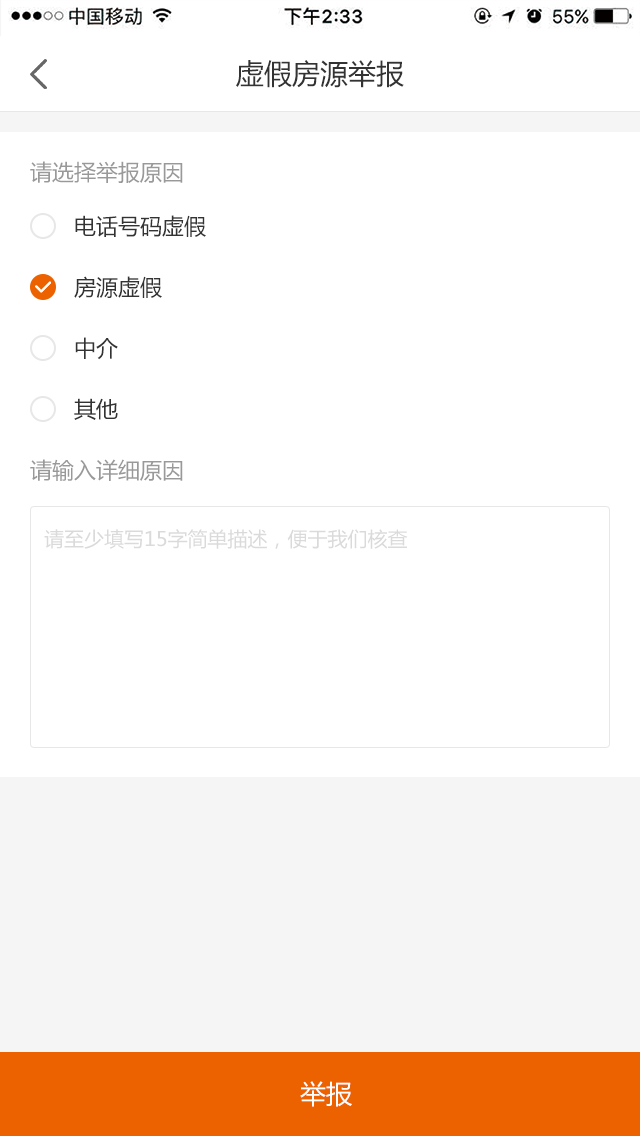
<style>
.page{position:relative;width:640px;height:1136px;background:#ffffff}
.page>*{position:absolute;margin:0}
.t1{font:28px "MicrosoftYaHei";color:#333333}
.t2{font:22px "MicrosoftYaHei";color:#999999}
.t3{font:22px "MicrosoftYaHei";color:#333333}
.t4{font:20px "MicrosoftYaHei";color:#dadada}
.t5{font:26px "MicrosoftYaHei";color:#ffffff}
</style>
<div class="page">
<p class="t1" style="left:236px;top:60px;width:168px;height:28px">虚假房源举报</p>
<p class="t2" style="left:30px;top:161px;width:153px;height:22px">请选择举报原因</p>
<p class="t3" style="left:75px;top:215px;width:131px;height:22px">电话号码虚假</p>
<p class="t3" style="left:74px;top:276px;width:88px;height:22px">房源虚假</p>
<p class="t3" style="left:75px;top:337px;width:43px;height:23px">中介</p>
<p class="t3" style="left:74px;top:398px;width:44px;height:22px">其他</p>
<p class="t2" style="left:30px;top:459px;width:153px;height:22px">请输入详细原因</p>
<p class="t4" style="left:44px;top:529px;width:364px;height:20px">请至少填写15字简单描述，便于我们核查</p>
<p class="t5" style="left:300px;top:1081px;width:52px;height:26px">举报</p>
</div>
